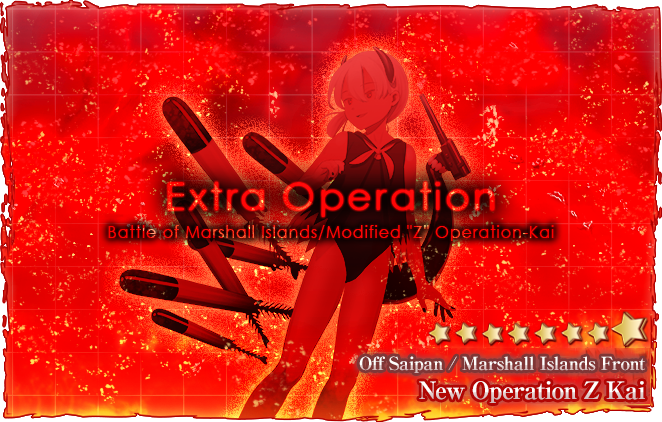
<style>
.page{position:relative;width:662px;height:422px}
.page>*{position:absolute;margin:0}
.t1{font:18px "RyuminPro-ExBold";letter-spacing:-0.04em}
.t2{font:24px "RyuminPro-ExBold";letter-spacing:-0.04em}
</style>
<div class="page">
<p class="t1" style="left:359px;top:356px;width:286px;height:17px">Off Saipan / Marshall Islands Front</p>
<p class="t2" style="left:419px;top:381px;width:226px;height:22px">New Operation Z Kai</p>
</div>
